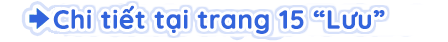
<style>
.page{position:relative;width:448px;height:42px;background:#ffffff}
.page>*{position:absolute;margin:0}
.t1{font:26px "Quicksand-Bold";color:#3264dc;font-weight:bold}
</style>
<div class="page">
<p class="t1" style="left:53px;top:5px;width:332px;height:29px">Chi tiết tại trang 15 “Lưu”</p>
</div>
